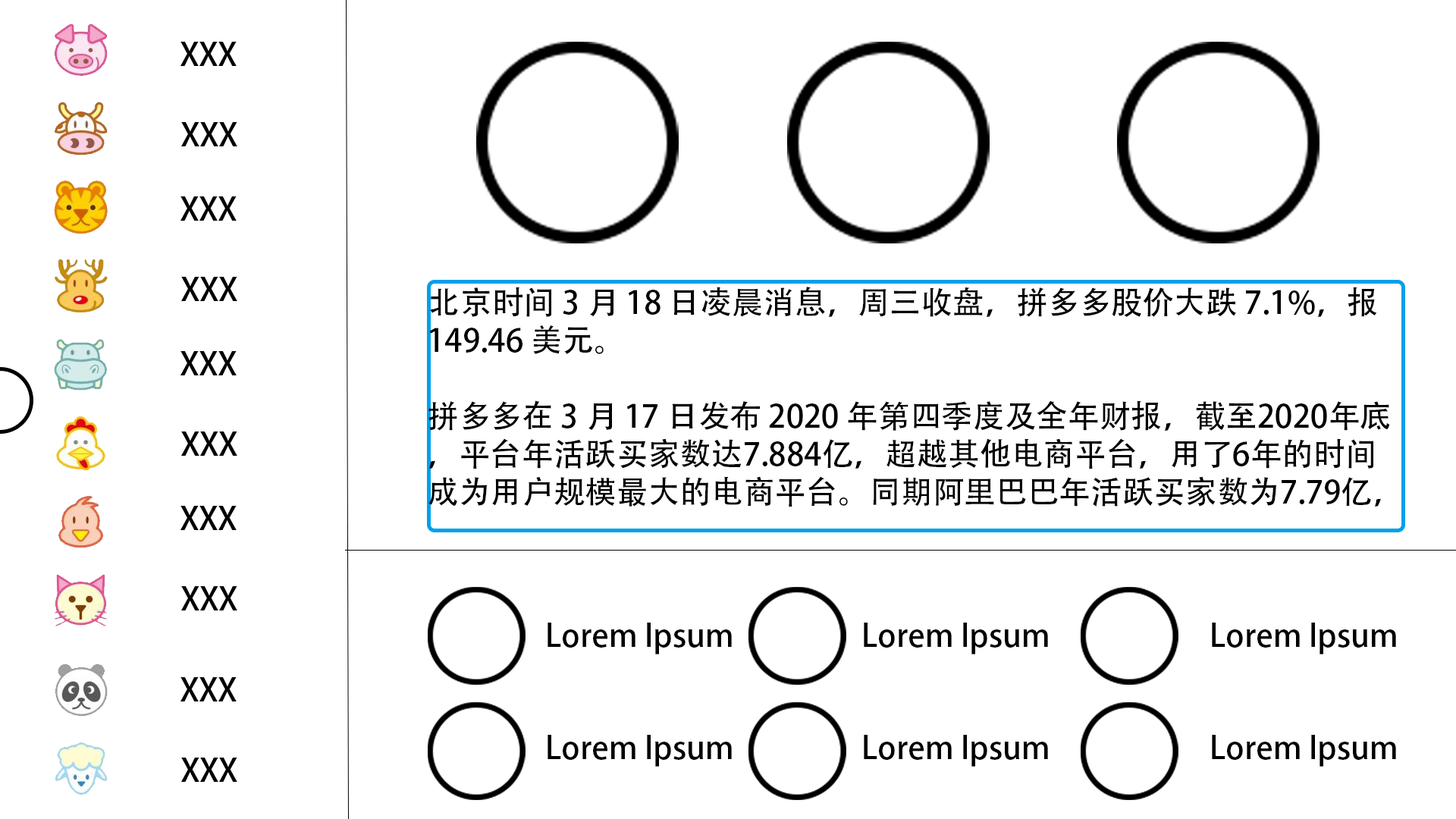
<style>
.page{position:relative;width:1456px;height:819px;background:#ffffff}
.page>*{position:absolute;margin:0}
.t1{font:31.6px "AdobeHeitiStd-Regular";color:#000000}
</style>
<div class="page">
<p class="t1" style="left:428px;top:287px;width:962px;height:220px">北京时间 3 月 18 日凌晨消息，周三收盘，拼多多股价大跌 7.1%，报 149.46 美元。<br><br>拼多多在 3 月 17 日发布 2020 年第四季度及全年财报，截至2020年底，平台年活跃买家数达7.884亿，超越其他电商平台，用了6年的时间成为用户规模最大的电商平台。同期阿里巴巴年活跃买家数为7.79亿，京东为4.72亿。过去一年，拼多多全年营收增长 97% 至 594.919 亿元，全年成交额（GMV）为 16676 亿元，同比增长 66%。</p>
<p class="t1" style="left:548px;top:623px;width:184px;height:31px">Lorem Ipsum</p>
<p class="t1" style="left:864px;top:623px;width:184px;height:31px">Lorem Ipsum</p>
<p class="t1" style="left:1212px;top:623px;width:184px;height:31px">Lorem Ipsum</p>
<p class="t1" style="left:548px;top:735px;width:184px;height:32px">Lorem Ipsum</p>
<p class="t1" style="left:864px;top:735px;width:184px;height:32px">Lorem Ipsum</p>
<p class="t1" style="left:1212px;top:735px;width:184px;height:32px">Lorem Ipsum</p>
</div>
